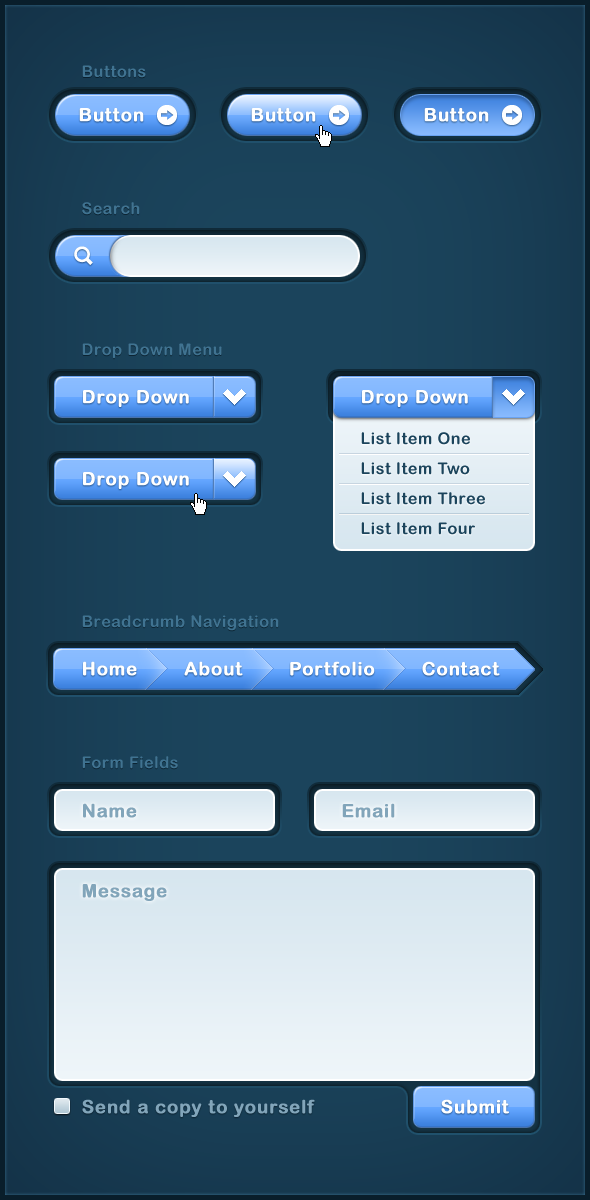
<style>
.page{position:relative;width:590px;height:1200px}
.page>*{position:absolute;margin:0}
.t1{font:16px "ArialRoundedMTBold";letter-spacing:0.04em;color:#407391}
.t2{font:18.2px "ArialRoundedMTBold";letter-spacing:0.04em;color:#ffffff;font-weight:bold}
.t3{font:16px/30px "ArialRoundedMTBold";letter-spacing:0.04em;color:#1b445c}
.t4{font:18.2px "ArialRoundedMTBold";letter-spacing:0.04em;color:#82a5ba;font-weight:bold}
</style>
<div class="page">
<p class="t1" style="left:82px;top:65px;width:64px;height:13px">Buttons</p>
<p class="t2" style="left:79px;top:108px;width:65px;height:14px">Button</p>
<p class="t2" style="left:251px;top:108px;width:65px;height:14px">Button</p>
<p class="t2" style="left:424px;top:108px;width:65px;height:14px">Button</p>
<p class="t1" style="left:82px;top:202px;width:58px;height:13px">Search</p>
<p class="t1" style="left:82px;top:343px;width:140px;height:16px">Drop Down Menu</p>
<p class="t2" style="left:83px;top:390px;width:106px;height:17px">Drop Down</p>
<p class="t2" style="left:362px;top:390px;width:106px;height:17px">Drop Down</p>
<p class="t3" style="left:361px;top:432px;width:124px;height:103px">List Item One<br>List Item Two<br>List Item Three<br>List Item Four</p>
<p class="t2" style="left:83px;top:472px;width:106px;height:17px">Drop Down</p>
<p class="t1" style="left:82px;top:615px;width:197px;height:16px">Breadcrumb Navigation</p>
<p class="t2" style="left:83px;top:661px;width:417px;height:15px">Home        About        Portfolio        Contact</p>
<p class="t1" style="left:82px;top:756px;width:96px;height:13px">Form Fields</p>
<p class="t4" style="left:83px;top:803px;width:54px;height:15px">Name</p>
<p class="t4" style="left:342px;top:803px;width:53px;height:15px">Email</p>
<p class="t4" style="left:82px;top:884px;width:85px;height:17px">Message</p>
<p class="t4" style="left:82px;top:1099px;width:233px;height:18px">Send a copy to yourself</p>
<p class="t2" style="left:441px;top:1099px;width:68px;height:15px">Submit</p>
</div>
